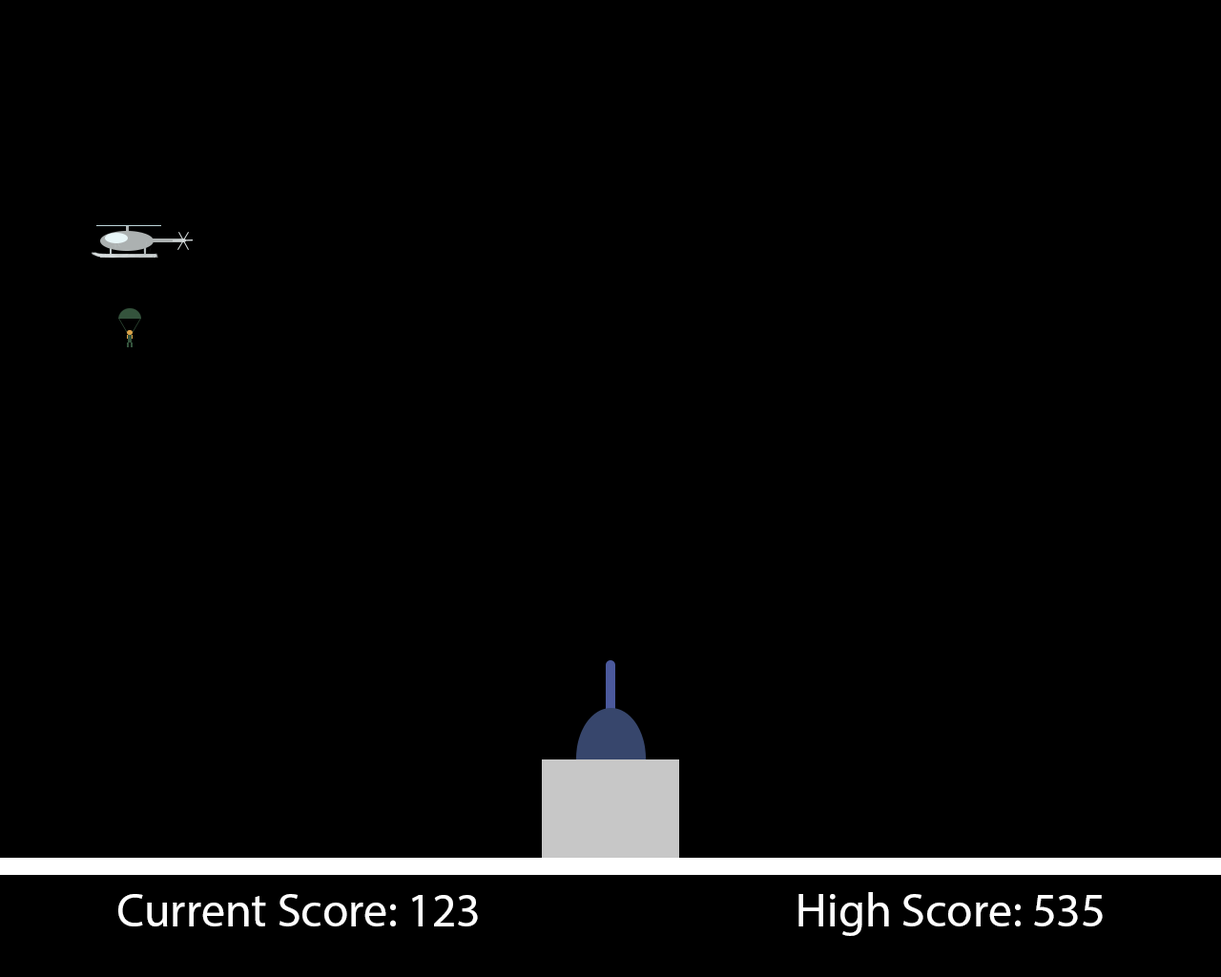
<style>
.page{position:relative;width:1221px;height:977px;background:#000000}
.page>*{position:absolute;margin:0}
.t1{font:11.4px "MyriadPro-Regular";color:#ffffff}
</style>
<div class="page">
<p class="t1" style="left:118px;top:894px;width:360px;height:32px">Current Score: 123</p>
<p class="t1" style="left:798px;top:892px;width:305px;height:44px">High Score: 535</p>
</div>
